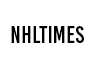
<style>
.page{position:relative;width:95px;height:69px;background:#ffffff}
.page>*{position:absolute;margin:0}
.t1{font:24px "BebasKai";color:#040000}
</style>
<div class="page">
<p class="t1" style="left:11px;top:26px;width:73px;height:17px">NHLTIMES</p>
</div>
